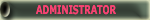
<style>
.page{position:relative;width:150px;height:20px}
.page>*{position:absolute;margin:0}
.t1{font:12px "Verdana-Bold";color:#f84372;scale:0.68 1}
</style>
<div class="page">
<p class="t1" style="left:36px;top:5px;width:80px;height:10px">ADMINISTRATOR</p>
</div>
